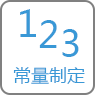
<style>
.page{position:relative;width:95px;height:95px;background:#ffffff}
.page>*{position:absolute;margin:0}
.t1{font:36px "MicrosoftYaHei";color:#3998d6}
.t2{font:18px "MicrosoftYaHei";color:#3998d6}
</style>
<div class="page">
<p class="t1" style="left:20px;top:9px;width:16px;height:28px">1</p>
<p class="t1" style="left:39px;top:20px;width:18px;height:28px">2</p>
<p class="t1" style="left:62px;top:29px;width:17px;height:28px">3</p>
<p class="t2" style="left:13px;top:67px;width:72px;height:17px">常量制定</p>
</div>
